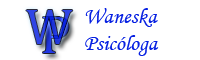
<style>
.page{position:relative;width:200px;height:60px;background:#ffffff}
.page>*{position:absolute;margin:0}
.t1{font:50px "Cambria";color:#0620e2}
.t2{font:26.4px "Tahoma";color:#020202}
.t3{font:54.2px "Cambria";color:#0620e2}
.t4{font:22.2px "MonotypeCorsiva";color:#0620e2}
</style>
<div class="page">
<p class="t1" style="left:26px;top:10px;width:47px;height:34px;opacity:0.83"><span class="t2">       </span>W</p>
<p class="t3" style="left:43px;top:17px;width:26px;height:36px;opacity:0.89"><span class="t2">       </span>P</p>
<p class="t4" style="left:85px;top:8px;width:74px;height:48px">Waneska Psicóloga</p>
</div>
